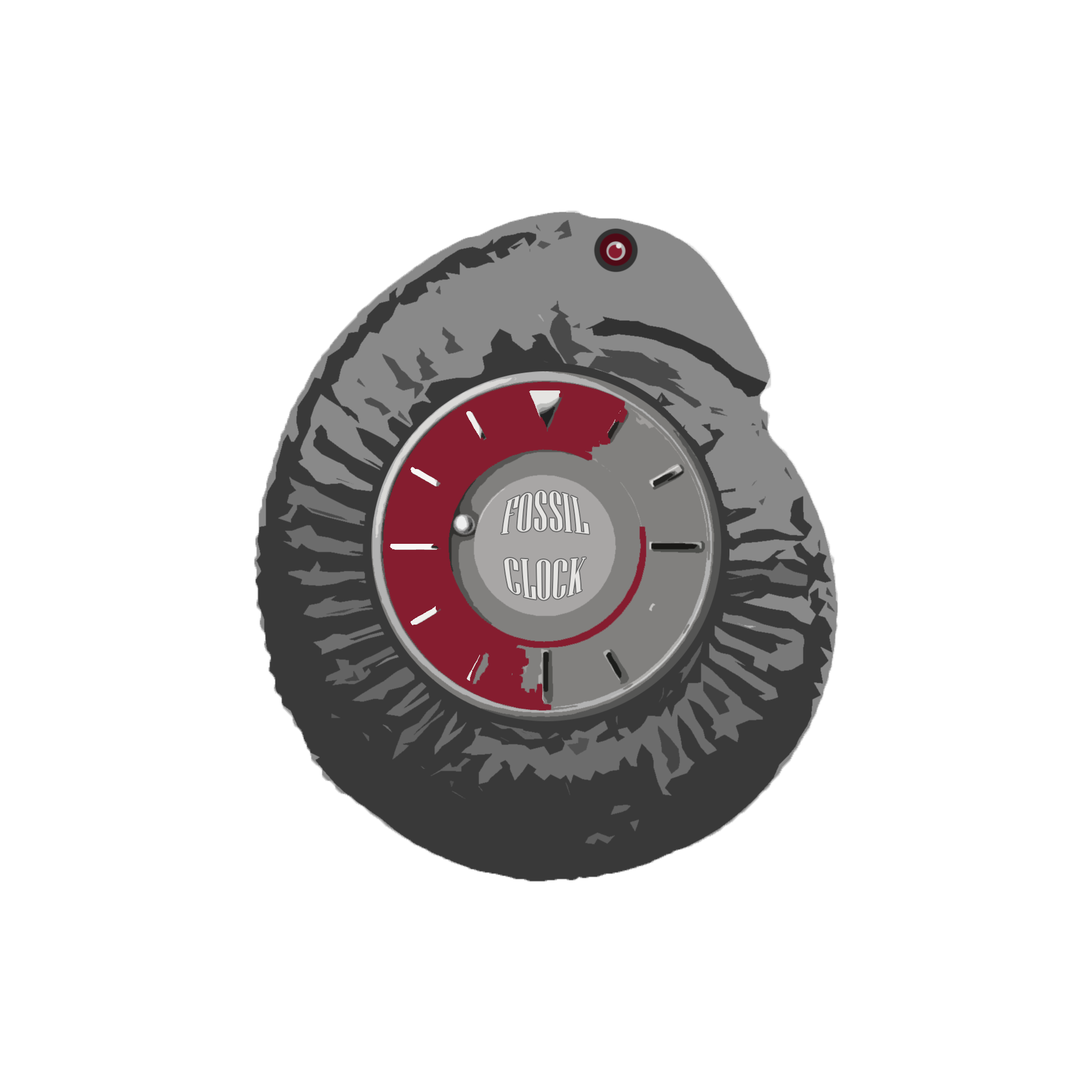
<style>
.page{position:relative;width:1092px;height:1092px;background:#ffffff}
.page>*{position:absolute;margin:0}
.t1{font:46px "NiagaraSolid-Reg";color:#e5e4e2}
</style>
<div class="page">
<p class="t1" style="left:501px;top:490px;width:88px;height:110px;text-align:center">FOSSIL<br>CLOCK</p>
</div>
